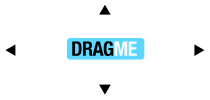
<style>
.page{position:relative;width:210px;height:100px;background:#ffffff}
.page>*{position:absolute;margin:0}
.t1{font:20px "HelveticaNeue-CondensedBold";letter-spacing:-0.03em;color:#000000;text-transform:uppercase}
.t2{font:20px "HelveticaNeue-CondensedBold";letter-spacing:-0.03em;color:#ffffff;text-transform:uppercase}
</style>
<div class="page">
<p class="t1" style="left:72px;top:41px;width:65px;height:15px">drag<span class="t2">me</span></p>
</div>
